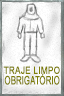
<style>
.page{position:relative;width:64px;height:96px}
.page>*{position:absolute;margin:0}
.t1{font:10.1px "ArialMT";color:#7f7f09;font-weight:bold;scale:0.82 1}
.t2{font:11.5px "ArialMT";color:#7f7f09;font-weight:bold;scale:0.66 1}
</style>
<div class="page">
<p class="t1" style="left:3px;top:66px;width:57px;height:8px">TRAJE LIMPO</p>
<p class="t2" style="left:4px;top:73px;width:56px;height:12px">OBRIGATÓRIO</p>
</div>
